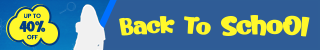
<style>
.page{position:relative;width:320px;height:50px;background:#2f5c96}
.page>*{position:absolute;margin:0}
.t1{font:5.9px "Poppins-Medium";color:#023c85}
.t2{font:23.2px "Kerokero";letter-spacing:-0.02em;color:#fff82b;scale:1.15 1}
.t3{font:26.3px "Kerokero";letter-spacing:-0.02em;color:#fff82b;scale:1.15 1}
.t4{font:14.8px "Kerokero";color:#023c85}
</style>
<div class="page">
<p class="t1" style="left:24px;top:13px;width:17px;height:5px">UP TO</p>
<p class="t2" style="left:119px;top:16px;width:92px;height:20px">Back To</p>
<p class="t3" style="left:220px;top:15px;width:90px;height:22px">SchoOl</p>
<p class="t4" style="left:19px;top:20px;width:27px;height:12px">40%</p>
<p class="t1" style="left:27px;top:34px;width:11px;height:6px">OFF</p>
</div>
